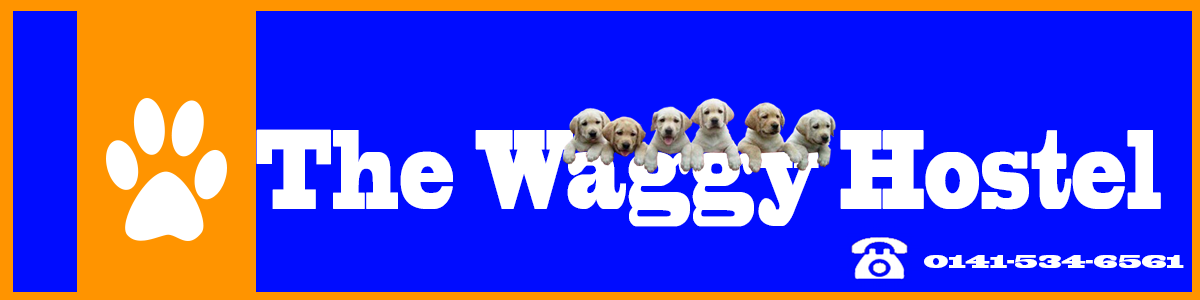
<style>
.page{position:relative;width:1200px;height:300px;background:#000cff}
.page>*{position:absolute;margin:0}
.t1{font:105.9px "BlackoakStd";color:#ffffff;scale:0.39 1}
.t2{font:16.7px "BlackoakStd";color:#ffffff}
</style>
<div class="page">
<p class="t1" style="left:256px;top:129px;width:905px;height:98px">The Waggy Hostel</p>
<p class="t2" style="left:924px;top:255px;width:260px;height:13px">0141-534-6561</p>
</div>
